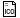
<style>
.page{position:relative;width:20px;height:18px;background:#ffffff}
.page>*{position:absolute;margin:0}
.t1{font:7px "Arial-BoldMT";scale:0.8 1}
</style>
<div class="page">
<p class="t1" style="left:5px;top:9px;width:10px;height:5px">ICO</p>
</div>
